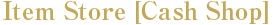
<style>
.page{position:relative;width:279px;height:25px;background:#ffffff}
.page>*{position:absolute;margin:0}
.t1{font:25px "RyuminPro-ExBold";color:#c3a956}
</style>
<div class="page">
<p class="t1" style="left:3px;top:1px;width:265px;height:23px">Item Store [Cash Shop]</p>
</div>
